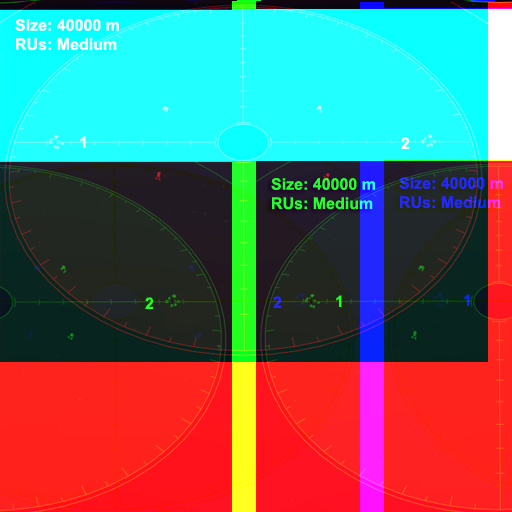
<style>
.page{position:relative;width:512px;height:512px}
.page>*{position:absolute;margin:0}
.t1{font:16px "Arial-BoldMT"}
.t2{font:16px "Arial-BoldMT";color:#ffffff}
</style>
<div class="page">
<p class="t1" style="left:15px;top:17px;width:104px;height:32px">Size: 40000 m<br>RUs: Medium</p>
<p class="t2" style="left:80px;top:134px;width:6px;height:12px">1</p>
</div>
